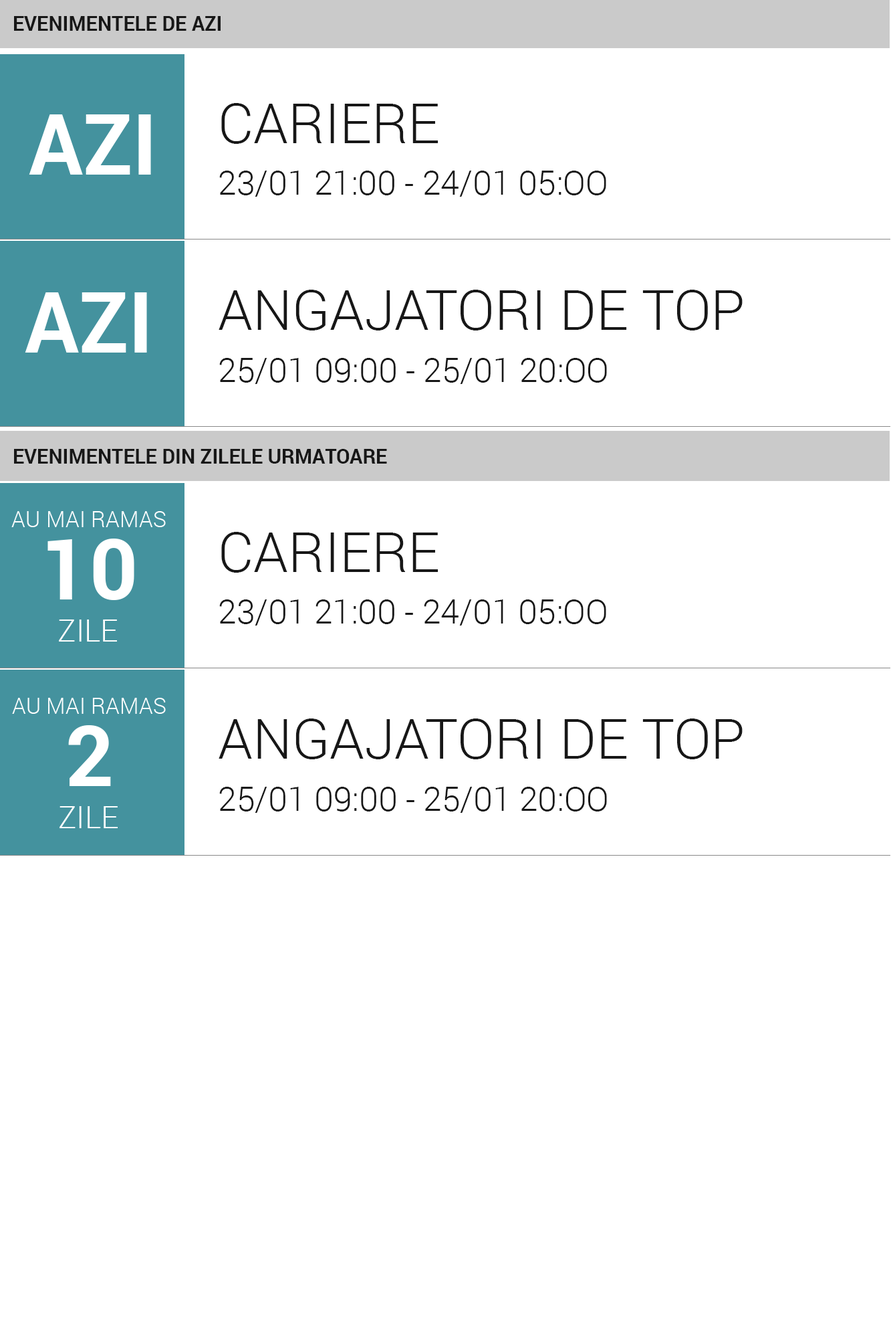
<style>
.page{position:relative;width:891px;height:1338px;background:#ffffff}
.page>*{position:absolute;margin:0}
.t1{font:20.1px "Roboto-Bold";color:#171717;text-transform:uppercase}
.t2{font:55.4px "Roboto-Light";color:#171717;text-transform:uppercase}
.t3{font:84.2px "Roboto-Bold";color:#ffffff;text-transform:uppercase}
.t4{font:33.3px "Roboto-Light";color:#171717;text-transform:uppercase}
.t5{font:55.7px "Roboto-Light";color:#171717;text-transform:uppercase}
.t6{font:33.4px "Roboto-Light";color:#171717;text-transform:uppercase}
.t7{font:22.3px "Roboto-Light";color:#ffffff;text-transform:uppercase}
.t8{font:30.7px "Roboto-Light";color:#ffffff;text-transform:uppercase}
.t9{font:84.1px "Roboto-Bold";color:#ffffff;text-transform:uppercase}
.t10{font:30.6px "Roboto-Light";color:#ffffff;text-transform:uppercase}
</style>
<div class="page">
<p class="t1" style="left:14px;top:16px;width:207px;height:15px">EVENIMENTELE DE AZI</p>
<p class="t2" style="left:221px;top:103px;width:218px;height:41px">Cariere</p>
<p class="t3" style="left:29px;top:114px;width:122px;height:61px">AZI</p>
<p class="t4" style="left:219px;top:171px;width:388px;height:26px">23/01 21:00 - 24/01 05:oo</p>
<p class="t3" style="left:25px;top:292px;width:122px;height:60px">AZI</p>
<p class="t5" style="left:219px;top:290px;width:524px;height:40px">Angajatori de top</p>
<p class="t6" style="left:219px;top:358px;width:388px;height:26px">25/01 09:00 - 25/01 20:oo</p>
<p class="t1" style="left:14px;top:449px;width:373px;height:14px">EVENIMENTELE DIN ZILELE URMATOARE</p>
<p class="t7" style="left:11px;top:511px;width:155px;height:16px">AU MAI RAMAS</p>
<p class="t2" style="left:221px;top:532px;width:218px;height:40px">Cariere</p>
<p class="t3" style="left:47px;top:538px;width:87px;height:62px">10</p>
<p class="t4" style="left:219px;top:599px;width:388px;height:26px">23/01 21:00 - 24/01 05:oo</p>
<p class="t8" style="left:59px;top:619px;width:58px;height:22px">zile</p>
<p class="t7" style="left:12px;top:698px;width:154px;height:16px">AU MAI RAMAS</p>
<p class="t9" style="left:68px;top:725px;width:43px;height:61px">2</p>
<p class="t5" style="left:219px;top:718px;width:524px;height:41px">Angajatori de top</p>
<p class="t6" style="left:219px;top:786px;width:388px;height:27px">25/01 09:00 - 25/01 20:oo</p>
<p class="t10" style="left:60px;top:806px;width:58px;height:22px">zile</p>
</div>
